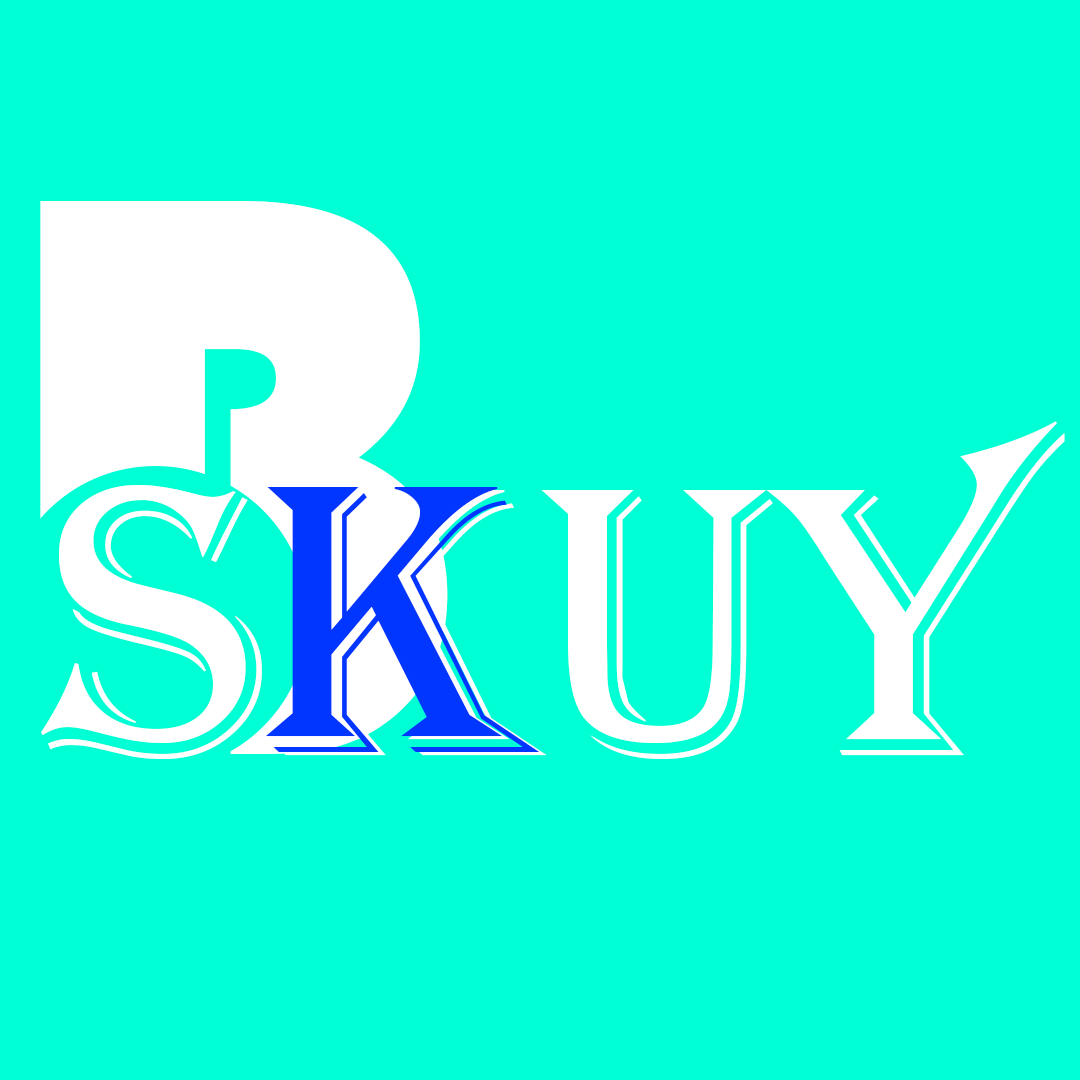
<style>
.page{position:relative;width:1080px;height:1080px;background:#00ffd5}
.page>*{position:absolute;margin:0}
.t1{font:829.1px "Bauhaus93";color:#ffffff}
.t2{font:398px "Algerian";color:#ffffff}
.t3{font:398px "Algerian";color:#0036ff}
</style>
<div class="page">
<p class="t1" style="left:40px;top:201px;width:408px;height:553px">B</p>
<p class="t2" style="left:41px;top:421px;width:1024px;height:338px">Skuy</p>
<p class="t3" style="left:265px;top:487px;width:275px;height:265px">K</p>
</div>
